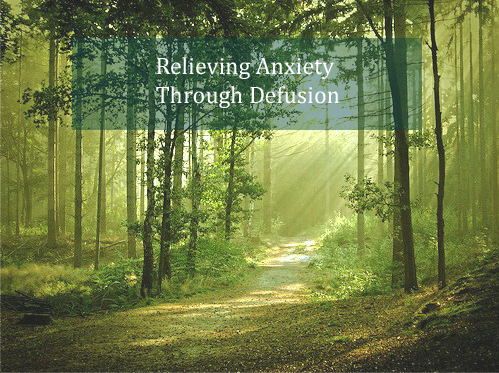
<style>
.page{position:relative;width:499px;height:373px}
.page>*{position:absolute;margin:0}
.t1{font:24px "Cambria";color:#ffffff}
</style>
<div class="page">
<p class="t1" style="left:156px;top:57px;width:183px;height:51px">Relieving Anxiety <br>Through Defusion</p>
</div>
